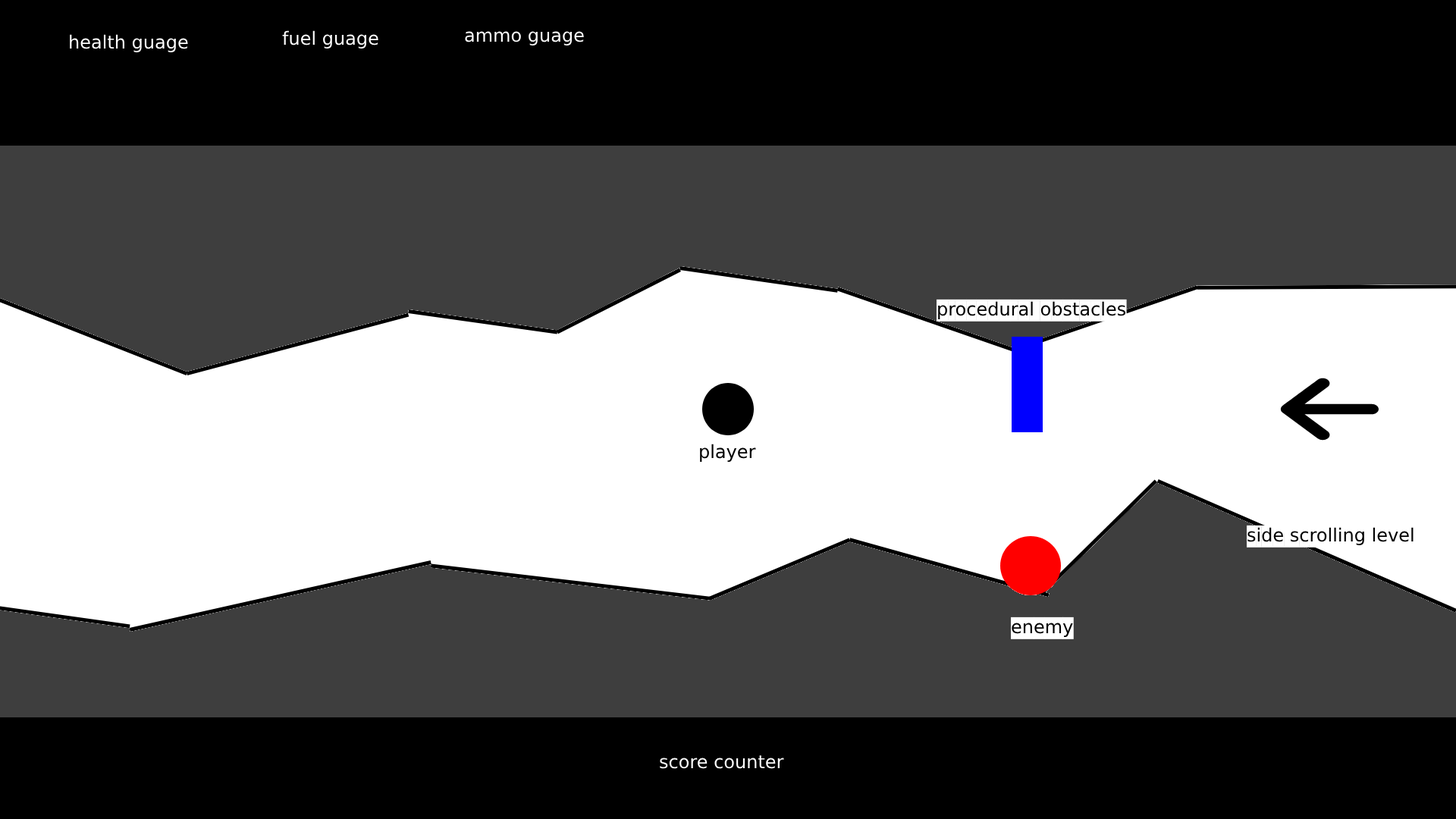
<style>
.page{position:relative;width:1456px;height:819px;background:#3e3e3e}
.page>*{position:absolute;margin:0}
.t1{font:18.2px "DejaVuSans";color:#ffffff}
.t2{font:18.2px "DejaVuSans";color:#000000}
</style>
<div class="page">
<p class="t1" style="left:70px;top:34px;width:118px;height:18px">health guage</p>
<p class="t1" style="left:282px;top:30px;width:96px;height:19px">fuel guage</p>
<p class="t1" style="left:465px;top:31px;width:119px;height:14px">ammo guage</p>
<p class="t2" style="left:700px;top:444px;width:56px;height:18px">player</p>
<p class="t1" style="left:660px;top:755px;width:124px;height:14px">score counter</p>
</div>
